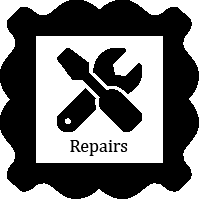
<style>
.page{position:relative;width:200px;height:200px;background:#000000}
.page>*{position:absolute;margin:0}
.t1{font:18px "Cambria";color:#000000}
</style>
<div class="page">
<p class="t1" style="left:70px;top:140px;width:58px;height:16px">Repairs</p>
</div>
